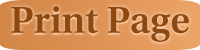
<style>
.page{position:relative;width:200px;height:50px}
.page>*{position:absolute;margin:0}
.t1{font:39.6px "UtopiaStd-Semibold";color:#8f480d}
</style>
<div class="page">
<p class="t1" style="left:11px;top:6px;width:178px;height:36px">Print Page</p>
</div>
